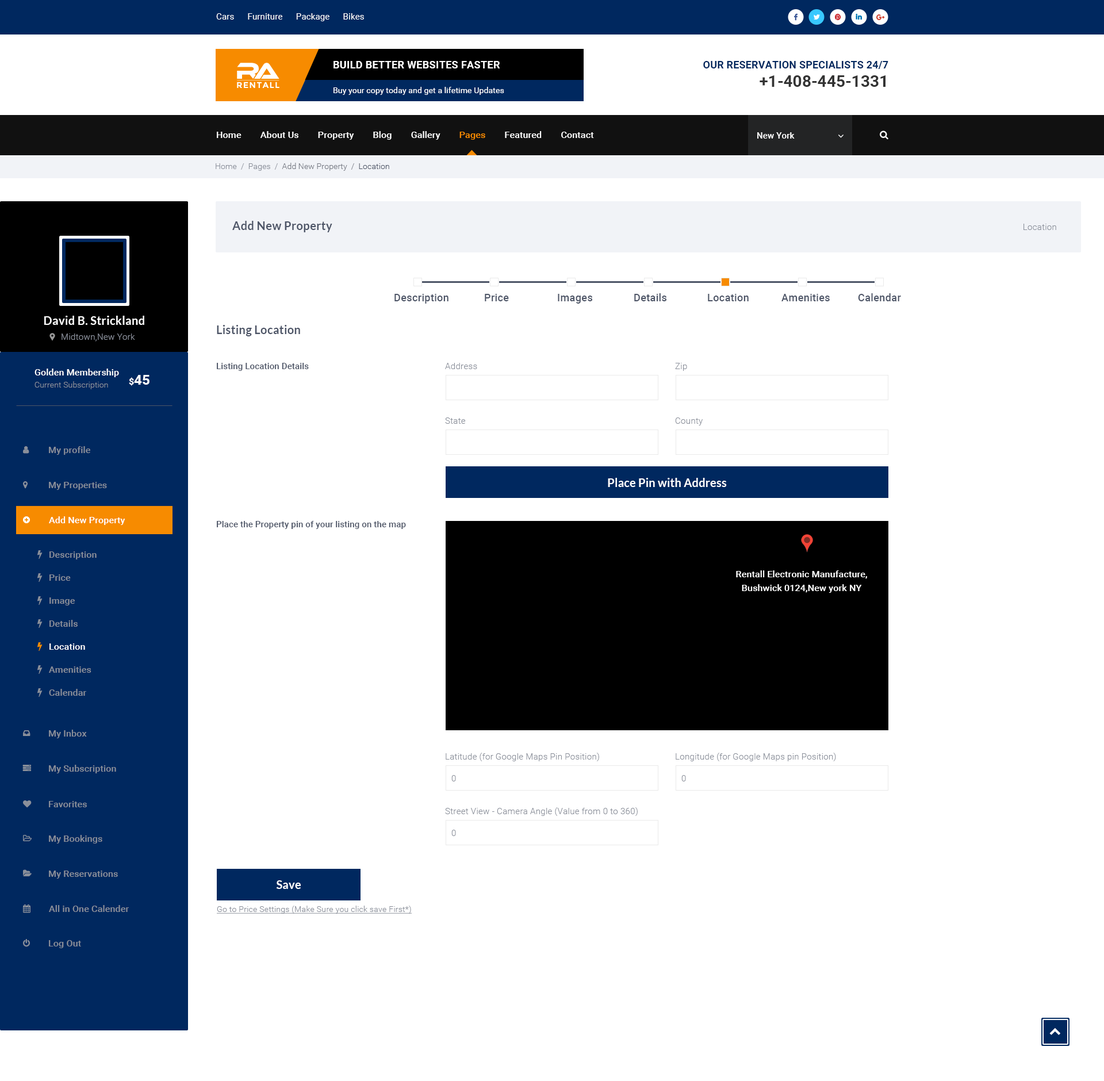
<style>
.page{position:relative;width:1104px;height:1081px;background:#ffffff}
.page>*{position:absolute;margin:0}
.t1{font:8.6px "Roboto-Regular";letter-spacing:0.01em;color:#ffffff}
.t2{font:10.3px "Roboto-Bold";letter-spacing:0.02em;color:#ffffff;text-transform:uppercase}
.t3{font:10.3px "Roboto-Bold";letter-spacing:0.01em;color:#00285f;text-transform:uppercase}
.t4{font:16.1px "Roboto-Bold";color:#333333}
.t5{font:8.4px "Montserrat-Bold";letter-spacing:0.08em;color:#ffffff;text-transform:uppercase}
.t6{font:8px "Roboto-Regular";letter-spacing:0.01em;color:#ffffff}
.t7{font:9.2px "Roboto-Medium";letter-spacing:0.01em;color:#ffffff}
.t8{font:9.2px "Roboto-Medium";letter-spacing:0.01em;color:#f78b00}
.t9{font:8.6px "Roboto-Medium";letter-spacing:0.01em;color:#ffffff}
.t10{font:8px "Roboto-Light";letter-spacing:0.01em;color:#757983}
.t11{font:8px "Roboto-Light";letter-spacing:0.01em;color:#8a8f9a}
.t12{font:8px "Roboto-Light";letter-spacing:0.01em;color:#4d5567}
.t13{font:11.5px "Lato-Bold";letter-spacing:0.01em;color:#4d5567}
.t14{font:8.6px "Roboto-Light";letter-spacing:0.01em;color:#8a8f9a}
.t15{font:10.3px "Roboto-Medium";letter-spacing:0.01em;color:#4d5567}
.t16{font:11.5px "Lato-Bold";letter-spacing:0.01em;color:#ffffff}
.t17{font:8.6px "Roboto-Medium";letter-spacing:0.01em;color:#4d5567}
.t18{font:13.8px "Roboto-Bold";letter-spacing:0.01em;color:#ffffff}
.t19{font:9.2px "Roboto-Bold";letter-spacing:0.01em;color:#ffffff}
.t20{font:9.2px "Roboto-Medium";letter-spacing:0.01em;color:#8a8f9a}
.t21{font:9.2px/23px "Roboto-Medium";letter-spacing:0.01em;color:#8a8f9a}
.t22{font:9.2px/23px "Roboto-Medium";letter-spacing:0.01em;color:#ffffff}
.t23{font:9.2px/13.8px "Roboto-Medium";letter-spacing:0.01em;color:#ffffff}
.t24{font:8px "Roboto-Light";letter-spacing:0.01em;color:#8a8f9a;text-decoration:underline}
</style>
<div class="page">
<p class="t1" style="left:216px;top:13px;width:148px;height:8px">Cars      Furniture      Package      Bikes</p>
<p class="t2" style="left:333px;top:61px;width:167px;height:7px">Build better Websites Faster</p>
<p class="t3" style="left:703px;top:61px;width:185px;height:8px">Our Reservation Specialists 24/7</p>
<p class="t4" style="left:759px;top:75px;width:126px;height:12px">+1-408-445-1331</p>
<p class="t5" style="left:237px;top:82px;width:42px;height:6px">RentAll</p>
<p class="t6" style="left:333px;top:87px;width:171px;height:8px">Buy your copy today and get a lifetime Updates</p>
<p class="t7" style="left:217px;top:131px;width:377px;height:9px">Home        About Us        Property        Blog        Gallery        <span class="t8">Pages</span>        Featured        Contact</p>
<p class="t9" style="left:757px;top:132px;width:37px;height:7px">New York</p>
<p class="t10" style="left:216px;top:163px;width:173px;height:8px"><span class="t11">Home  /  Pages  /  </span>Add New Property  /  <span class="t12">Location</span></p>
<p class="t13" style="left:232px;top:221px;width:100px;height:11px">Add New Property</p>
<p class="t14" style="left:1023px;top:224px;width:33px;height:6px">Location</p>
<p class="t15" style="left:394px;top:294px;width:54px;height:9px">Description</p>
<p class="t15" style="left:485px;top:294px;width:24px;height:7px">Price</p>
<p class="t15" style="left:558px;top:294px;width:34px;height:9px">Images</p>
<p class="t15" style="left:634px;top:293px;width:32px;height:8px">Details</p>
<p class="t15" style="left:708px;top:294px;width:40px;height:7px">Location</p>
<p class="t15" style="left:781px;top:294px;width:48px;height:7px">Amenities</p>
<p class="t15" style="left:858px;top:293px;width:43px;height:8px">Calendar</p>
<p class="t16" style="left:44px;top:316px;width:100px;height:9px">David B. Strickland</p>
<p class="t13" style="left:217px;top:325px;width:83px;height:11px">Listing Location</p>
<p class="t14" style="left:61px;top:333px;width:74px;height:8px">Midtown,New York</p>
<p class="t17" style="left:217px;top:363px;width:92px;height:8px">Listing Location Details</p>
<p class="t14" style="left:445px;top:363px;width:32px;height:6px">Address</p>
<p class="t14" style="left:675px;top:363px;width:12px;height:8px">Zip</p>
<p class="t7" style="left:34px;top:368px;width:85px;height:9px">Golden Membership</p>
<p class="t18" style="left:129px;top:375px;width:20px;height:11px"><span class="t19">$</span>45</p>
<p class="t11" style="left:34px;top:381px;width:74px;height:8px">Current Subscription</p>
<p class="t14" style="left:445px;top:417px;width:21px;height:7px">State</p>
<p class="t14" style="left:675px;top:417px;width:27px;height:8px">County</p>
<p class="t20" style="left:49px;top:446px;width:41px;height:9px">My profile</p>
<p class="t20" style="left:49px;top:482px;width:58px;height:8px">My Properties</p>
<p class="t16" style="left:608px;top:478px;width:118px;height:9px">Place Pin with Address</p>
<p class="t7" style="left:49px;top:516px;width:76px;height:9px">Add New Property</p>
<p class="t17" style="left:217px;top:521px;width:189px;height:8px">Place the Property pin of your listing on the map</p>
<p class="t21" style="left:49px;top:551px;width:48px;height:144px">Description<br>Price<br>Image<br>Details<br><span class="t22">Location<br></span>Amenities<br>Calendar</p>
<p class="t23" style="left:736px;top:570px;width:131px;height:23px;text-align:center">Rentall Electronic Manufacture,<br>Bushwick 0124,New york NY</p>
<p class="t20" style="left:49px;top:729px;width:38px;height:9px">My Inbox</p>
<p class="t14" style="left:445px;top:752px;width:154px;height:9px">Latitude (for Google Maps Pin Position)</p>
<p class="t14" style="left:675px;top:752px;width:161px;height:9px">Longitude (for Google Maps pin Position)</p>
<p class="t20" style="left:49px;top:764px;width:67px;height:9px">My Subscription</p>
<p class="t14" style="left:451px;top:775px;width:5px;height:6px">0</p>
<p class="t14" style="left:681px;top:775px;width:5px;height:6px">0</p>
<p class="t20" style="left:49px;top:801px;width:38px;height:6px">Favorites</p>
<p class="t14" style="left:445px;top:807px;width:192px;height:9px">Street View - Camera Angle (Value from 0 to 360)</p>
<p class="t14" style="left:451px;top:829px;width:5px;height:7px">0</p>
<p class="t20" style="left:49px;top:835px;width:53px;height:8px">My Bookings</p>
<p class="t20" style="left:49px;top:870px;width:69px;height:8px">My Reservations</p>
<p class="t16" style="left:276px;top:880px;width:25px;height:9px">Save</p>
<p class="t20" style="left:49px;top:905px;width:80px;height:7px">All in One Calender</p>
<p class="t24" style="left:217px;top:905px;width:195px;height:8px">Go to Price Settings (Make Sure you click save First*)</p>
<p class="t20" style="left:49px;top:940px;width:32px;height:8px">Log Out</p>
</div>
